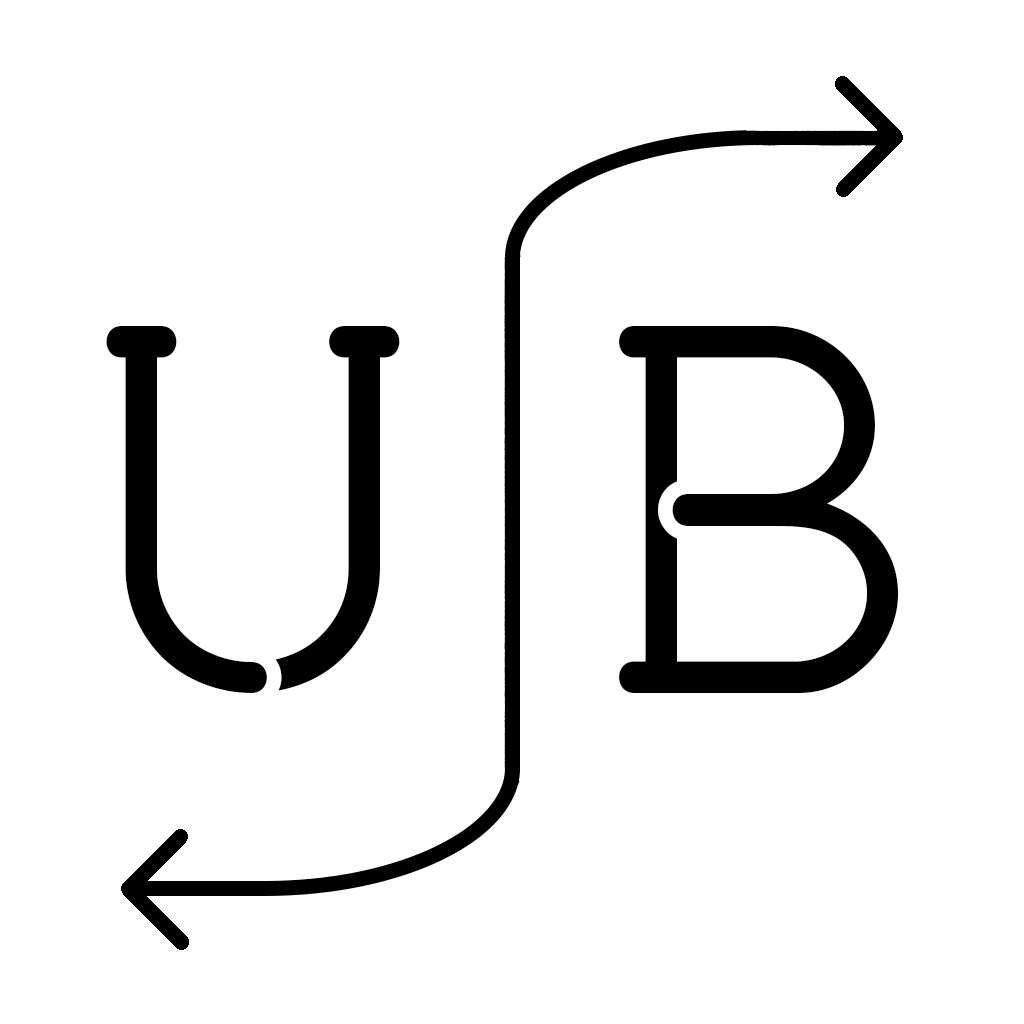
<style>
.page{position:relative;width:1024px;height:1024px;background:#ffffff}
.page>*{position:absolute;margin:0}
.t1{font:500px "pironv2stencil";color:#000000}
.t2{font:500.2px "pironv2stencil";color:#000000}
</style>
<div class="page">
<p class="t1" style="left:106px;top:326px;width:294px;height:367px">U</p>
<p class="t2" style="left:619px;top:326px;width:280px;height:367px">B</p>
</div>
